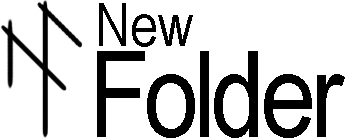
<style>
.page{position:relative;width:345px;height:139px;background:#ffffff}
.page>*{position:absolute;margin:0}
.t1{font:60px "ArialNarrow";color:#000000}
.t2{font:120px "ArialNarrow";letter-spacing:-0.04em;color:#000000}
</style>
<div class="page">
<p class="t1" style="left:99px;top:3px;width:94px;height:44px">New</p>
<p class="t2" style="left:97px;top:51px;width:248px;height:87px">Folder</p>
</div>
